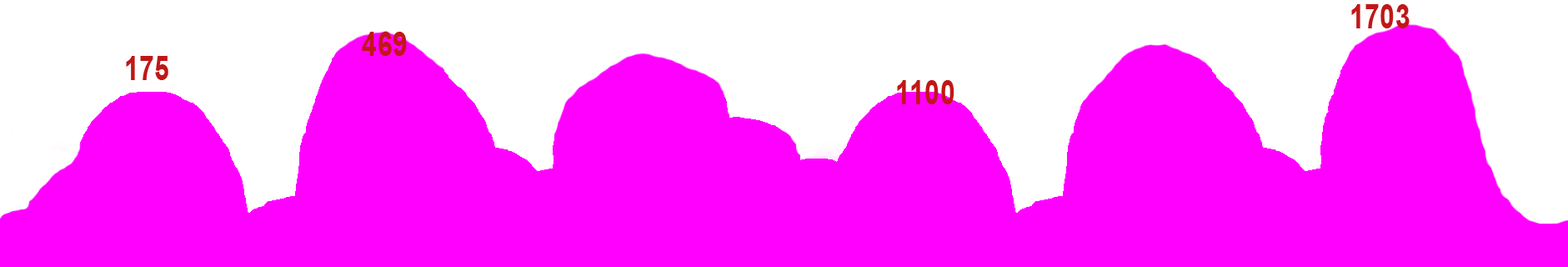
<style>
.page{position:relative;width:1568px;height:267px;background:#ff00ff}
.page>*{position:absolute;margin:0}
.t1{font:33px "Arial-BoldMT";letter-spacing:0.01em;color:#c01717;scale:0.82 1}
</style>
<div class="page">
<p class="t1" style="left:1351px;top:4px;width:59px;height:24px">1703</p>
<p class="t1" style="left:362px;top:32px;width:45px;height:24px">469</p>
<p class="t1" style="left:126px;top:56px;width:42px;height:24px">175</p>
<p class="t1" style="left:897px;top:80px;width:57px;height:24px">1100</p>
</div>
